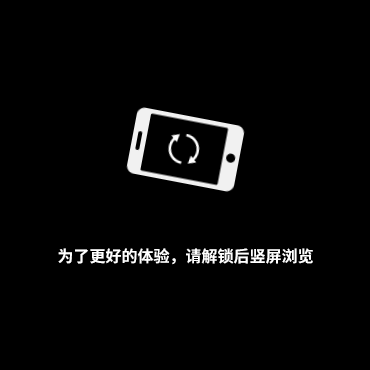
<style>
.page{position:relative;width:370px;height:370px;background:#000000}
.page>*{position:absolute;margin:0}
.t1{font:16px "SourceHanSansCN-Bold";color:#ffffff}
</style>
<div class="page">
<p class="t1" style="left:58px;top:248px;width:255px;height:17px">为了更好的体验，请解锁后竖屏浏览</p>
</div>
